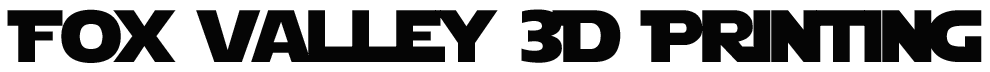
<style>
.page{position:relative;width:990px;height:72px;background:#ffffff}
.page>*{position:absolute;margin:0}
.t1{font:73.4px "StarJedi";letter-spacing:-0.04em;color:#050505}
</style>
<div class="page">
<p class="t1" style="left:7px;top:9px;width:975px;height:54px">Fox valley 3D Printing</p>
</div>
